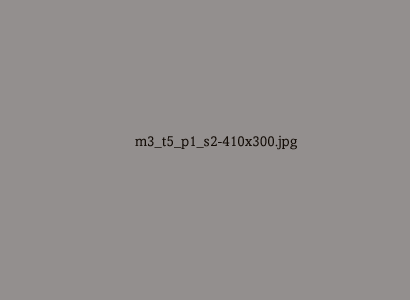
<style>
.page{position:relative;width:410px;height:300px;background:#938f8e}
.page>*{position:absolute;margin:0}
.t1{font:14.5px "AmasisMT";color:#120b05}
</style>
<div class="page">
<p class="t1" style="left:135px;top:135px;width:162px;height:15px">m3_t5_p1_s2-410x300.jpg</p>
</div>
